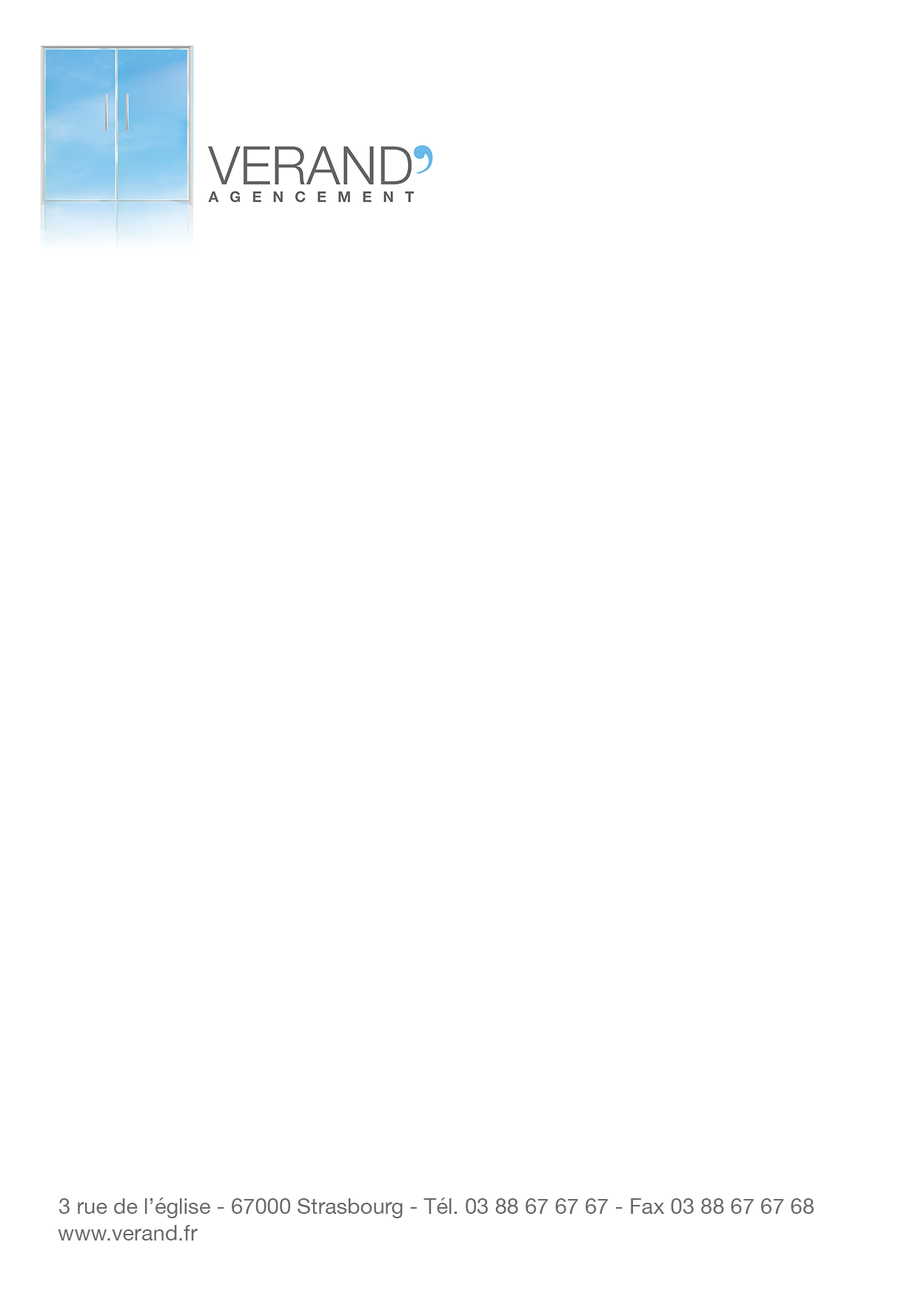
<style>
.page{position:relative;width:918px;height:1299px;background:#ffffff}
.page>*{position:absolute;margin:0}
.t1{font:21.6px "HelveticaNeue";color:#676766}
</style>
<div class="page">
<p class="t1" style="left:58px;top:1197px;width:756px;height:21px">3 rue de l’église - 67000 Strasbourg - Tél. 03 88 67 67 67 - Fax 03 88 67 67 68</p>
<p class="t1" style="left:58px;top:1225px;width:140px;height:15px">www.verand.fr</p>
</div>
